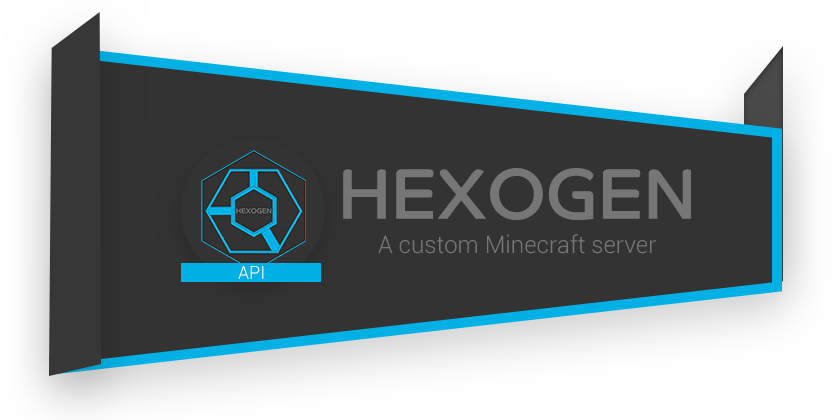
<style>
.page{position:relative;width:840px;height:420px;background:#333333}
.page>*{position:absolute;margin:0}
.t1{font:72px "CoHeadlineCorp-Regular";color:#767676}
.t2{font:24px "Roboto-Light";color:#767676}
.t3{font:18px "Roboto-Light";color:#f8f8f8}
</style>
<div class="page">
<p class="t1" style="left:343px;top:168px;width:348px;height:52px">HEXOGEN</p>
<p class="t2" style="left:378px;top:234px;width:278px;height:20px">A custom Minecraft server</p>
<p class="t3" style="left:238px;top:266px;width:26px;height:13px">API</p>
</div>
